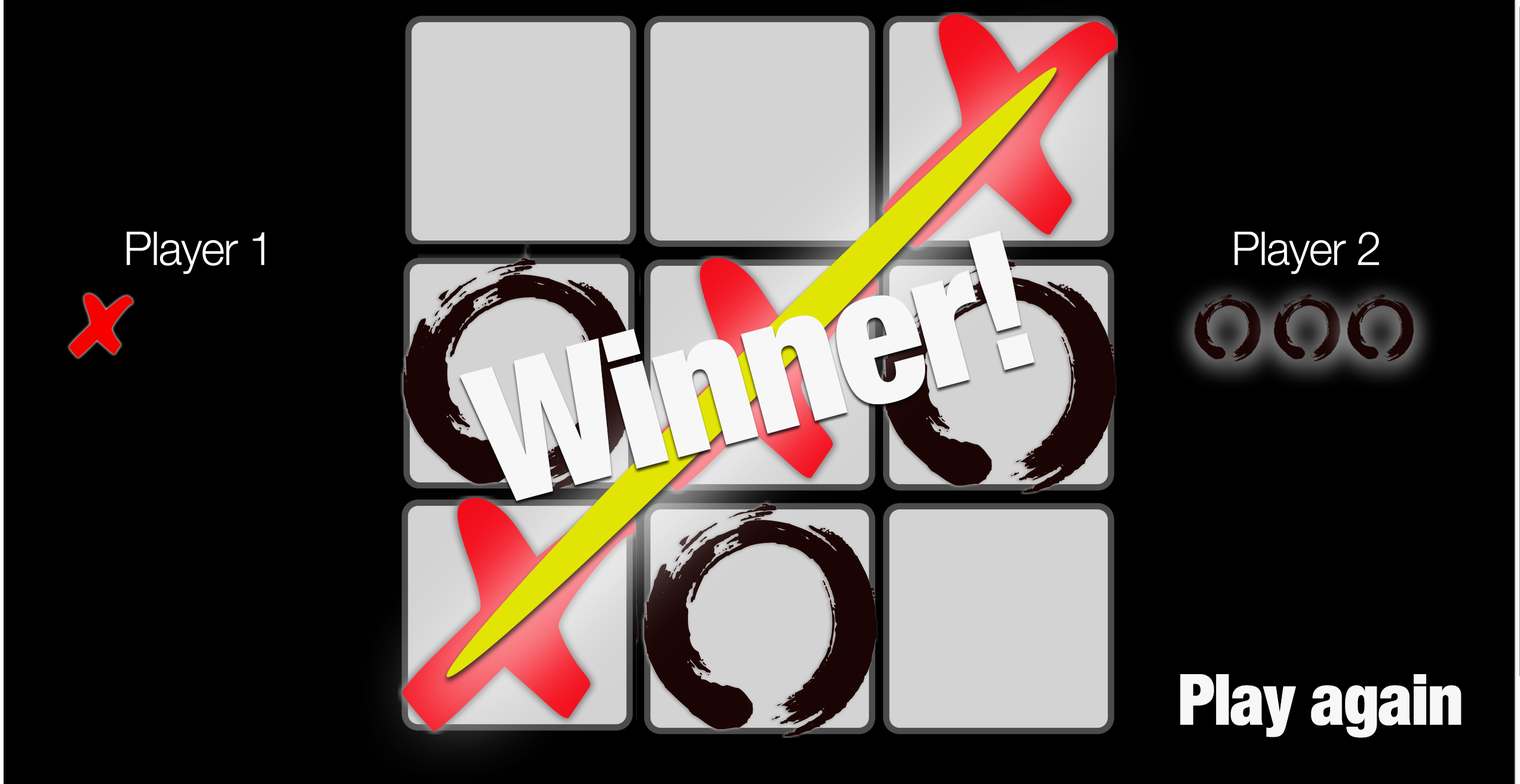
<style>
.page{position:relative;width:1520px;height:784px;background:#000000}
.page>*{position:absolute;margin:0}
.t1{font:46.6px "HelveticaNeue-Light";letter-spacing:-0.02em;color:#ffffff;scale:0.97 1}
.t2{font:190px "HelveticaNeue-CondensedBlack";letter-spacing:-0.02em;color:#f8f7f7}
.t3{font:70.9px "HelveticaNeue-CondensedBlack";letter-spacing:-0.02em;color:#f8f7f7}
</style>
<div class="page">
<p class="t1" style="left:127px;top:232px;width:138px;height:42px">Player 1</p>
<p class="t2" style="left:459px;top:231px;width:576px;height:270px;rotate:-15deg">Winner!</p>
<p class="t1" style="left:1235px;top:232px;width:144px;height:42px">Player 2</p>
<p class="t3" style="left:1180px;top:674px;width:282px;height:64px">Play again</p>
</div>
